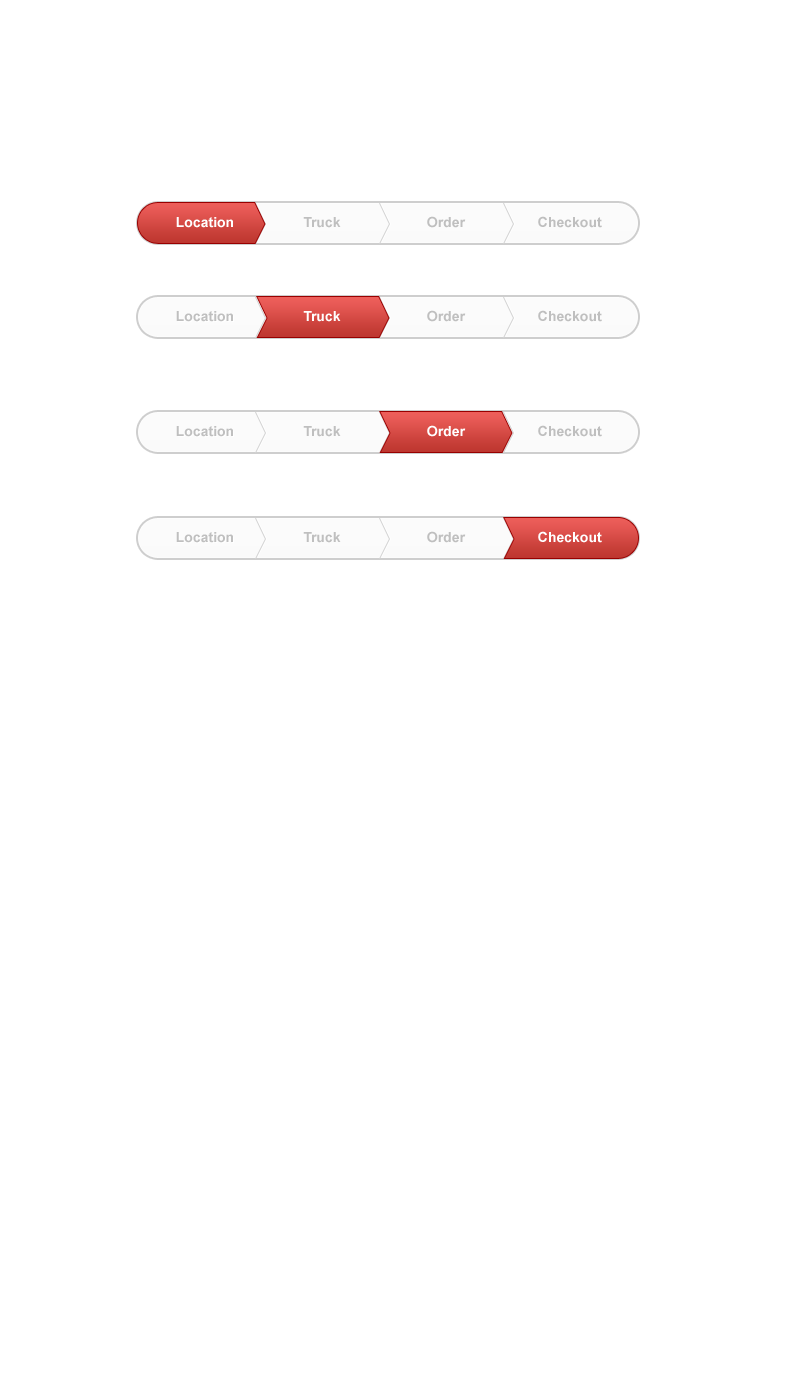
<style>
.page{position:relative;width:787px;height:1377px;background:#ffffff}
.page>*{position:absolute;margin:0}
.t1{font:14px "Arial-BoldMT";color:#ffffff}
.t2{font:14px "Arial-BoldMT";color:#bfbfbf}
</style>
<div class="page">
<p class="t1" style="left:176px;top:217px;width:57px;height:11px">Location</p>
<p class="t2" style="left:303px;top:217px;width:38px;height:11px">Truck</p>
<p class="t2" style="left:427px;top:216px;width:39px;height:12px">Order</p>
<p class="t2" style="left:538px;top:216px;width:64px;height:12px">Checkout</p>
<p class="t2" style="left:176px;top:311px;width:57px;height:11px">Location</p>
<p class="t1" style="left:303px;top:311px;width:38px;height:11px">Truck</p>
<p class="t2" style="left:427px;top:310px;width:39px;height:12px">Order</p>
<p class="t2" style="left:538px;top:310px;width:64px;height:12px">Checkout</p>
<p class="t1" style="left:427px;top:425px;width:39px;height:12px">Order</p>
<p class="t2" style="left:538px;top:425px;width:64px;height:12px">Checkout</p>
<p class="t2" style="left:176px;top:426px;width:57px;height:11px">Location</p>
<p class="t2" style="left:303px;top:426px;width:38px;height:11px">Truck</p>
<p class="t2" style="left:176px;top:532px;width:57px;height:11px">Location</p>
<p class="t2" style="left:303px;top:532px;width:38px;height:11px">Truck</p>
<p class="t2" style="left:427px;top:531px;width:39px;height:12px">Order</p>
<p class="t1" style="left:538px;top:531px;width:64px;height:12px">Checkout</p>
</div>
